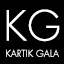
<style>
.page{position:relative;width:64px;height:64px;background:#000000}
.page>*{position:absolute;margin:0}
.t1{font:40px "FuturaStd-Light";color:#ffffff;font-weight:bold}
.t2{font:9px "FuturaStd-Light";color:#ffffff;font-weight:bold}
</style>
<div class="page">
<p class="t1" style="left:6px;top:9px;width:54px;height:33px">KG</p>
<p class="t2" style="left:6px;top:49px;width:53px;height:8px">KARTIK GALA</p>
</div>
